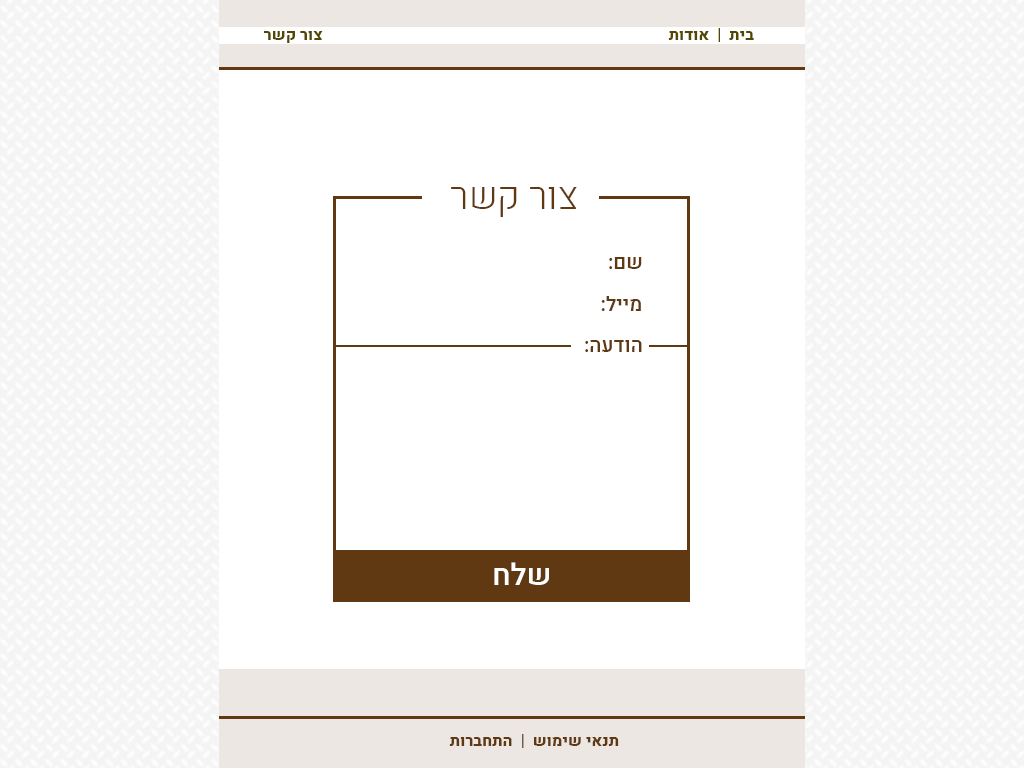
<style>
.page{position:relative;width:1024px;height:768px;background:#ffffff}
.page>*{position:absolute;margin:0}
.t1{font:38px "Heebo-Light";color:#603913}
.t2{font:20px "Heebo-Medium";color:#603913}
.t3{font:30px "Heebo-Medium";color:#ffffff}
.t4{font:16px "Heebo-ExtraBold";color:#603913}
</style>
<div class="page">
<p class="t1" style="left:451px;top:187px;width:126px;height:30px">צור קשר</p>
<p class="t2" style="left:609px;top:257px;width:33px;height:12px">שם:</p>
<p class="t2" style="left:601px;top:296px;width:40px;height:15px">מייל:</p>
<p class="t2" style="left:585px;top:340px;width:57px;height:12px">הודעה:</p>
<p class="t3" style="left:494px;top:562px;width:55px;height:23px">שלח</p>
<p class="t4" style="left:449px;top:734px;width:170px;height:14px">תנאי שימוש  |  התחברות</p>
</div>
